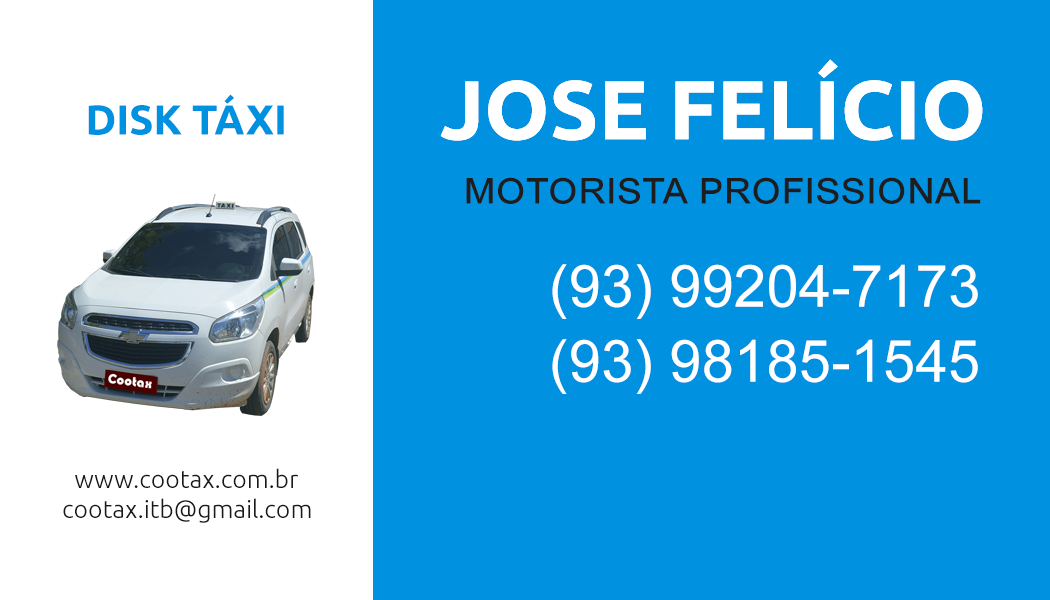
<style>
.page{position:relative;width:1050px;height:600px;background:#0091e1}
.page>*{position:absolute;margin:0}
.t1{font:83.3px "Ubuntu-Bold";color:#ffffff;text-transform:uppercase}
.t2{font:41.7px "Ubuntu-Bold";color:#0091e1;text-transform:uppercase}
.t3{font:45.8px "ArialMT";color:#1f1e1e;font-variant:small-caps}
.t4{font:58.3px/75px "ArialMT";color:#ffffff}
.t5{font:25px "Ubuntu-Light";color:#181818}
</style>
<div class="page">
<p class="t1" style="left:440px;top:59px;width:543px;height:82px">Jose felício</p>
<p class="t1" style="left:440px;top:59px;width:543px;height:82px">Jose felício</p>
<p class="t2" style="left:88px;top:94px;width:196px;height:41px">Disk Táxi</p>
<p class="t3" style="left:466px;top:177px;width:515px;height:27px">motorista profissional</p>
<p class="t4" style="left:552px;top:264px;width:426px;height:130px;text-align:right">(93) 99204-7173<br>(93) 98185-1545</p>
<p class="t5" style="left:63px;top:468px;width:248px;height:55px;text-align:center">www.cootax.com.br<br>cootax.itb@gmail.com</p>
</div>
